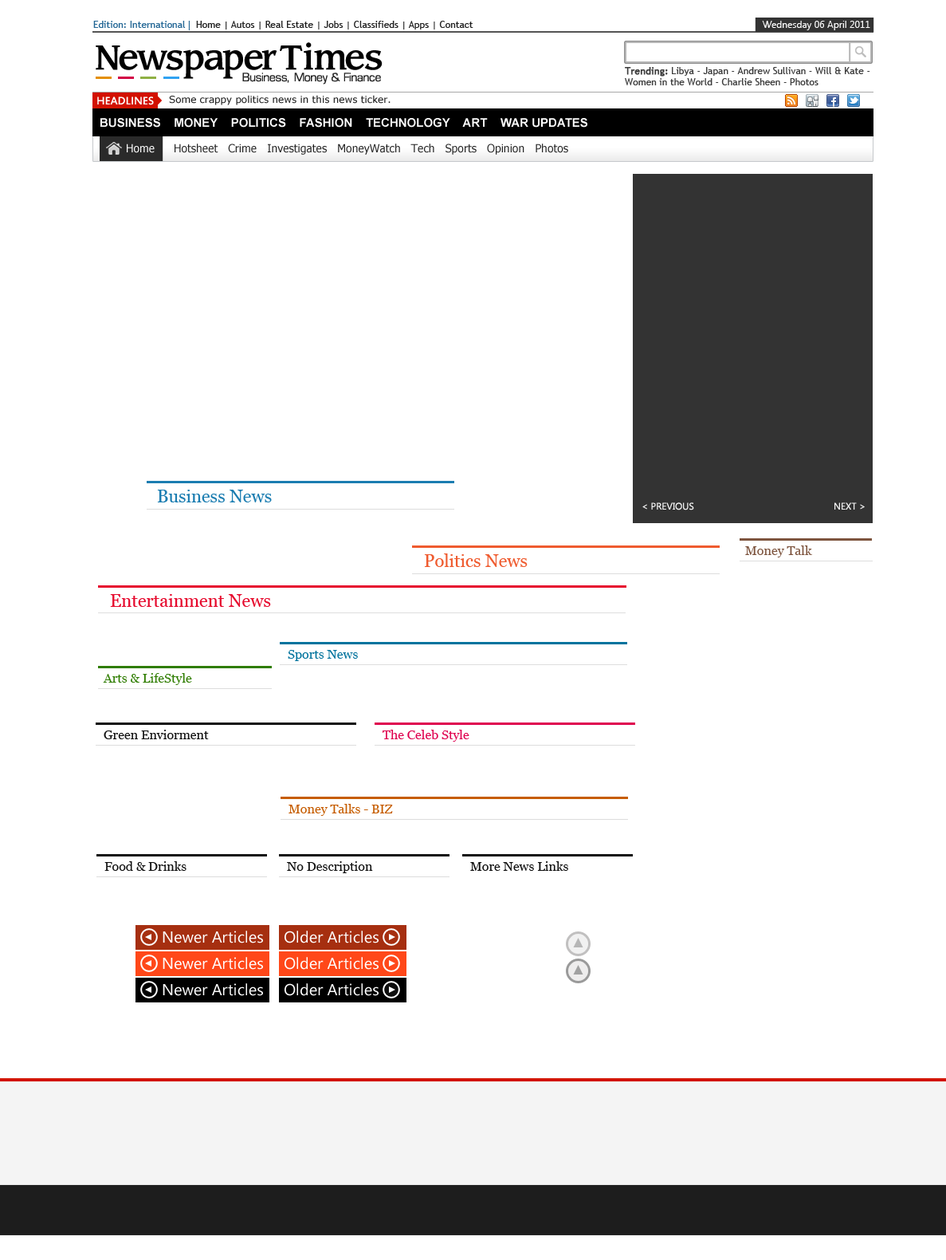
<style>
.page{position:relative;width:946px;height:1260px;background:#ffffff}
.page>*{position:absolute;margin:0}
.t1{font:9.6px "TrebuchetMS";color:#256896}
.t2{font:9.6px "SegoeUI";color:#256896}
.t3{font:9.6px "TrebuchetMS";color:#232323}
.t4{font:9.6px "SegoeUI";color:#ffffff}
.t5{font:35.9px "Sling";color:#000000}
.t6{font:12.8px "WaukeganLDO";color:#232323}
.t7{font:9.6px "TrebuchetMS";color:#3c3c3c}
.t8{font:9.6px "TrebuchetMS";color:#3c3c3c;font-weight:bold}
.t9{font:12px "EstrangeloEdessa";color:#ffffff}
.t10{font:9.6px "Verdana";color:#232323}
.t11{font:12px "Arial-BoldMT";color:#ffffff}
.t12{font:11.2px "Tahoma";color:#ffffff}
.t13{font:11.2px "Tahoma";color:#232323}
.t14{font:17.5px "Georgia";color:#1b7db1}
.t15{font:9.6px "SegoeUI";color:#f5f5f5}
.t16{font:12.8px "Georgia";color:#7d543e}
.t17{font:17.5px "Georgia";color:#ef5b2f}
.t18{font:17.5px "Georgia";color:#e60a2e}
.t19{font:12.8px "Georgia";color:#00739d}
.t20{font:12.8px "Georgia";color:#2f7d00}
.t21{font:12.8px "Georgia";color:#101010}
.t22{font:12.8px "Georgia";color:#df004f}
.t23{font:12.8px "Georgia";color:#c65d00}
.t24{font:15.9px "SegoeUI";color:#ffffff}
</style>
<div class="page">
<p class="t1" style="left:93px;top:21px;width:97px;height:9px">Edition: International <span class="t2">|</span></p>
<p class="t3" style="left:196px;top:21px;width:278px;height:9px">Home | Autos | Real Estate | Jobs | Classifieds | Apps | Contact</p>
<p class="t4" style="left:762px;top:21px;width:109px;height:9px">Wednesday 06 April 2011</p>
<p class="t5" style="left:96px;top:42px;width:287px;height:37px">Newspaper Times</p>
<p class="t6" style="left:242px;top:73px;width:139px;height:12px">Business,  Money &amp; Finance</p>
<p class="t7" style="left:625px;top:67px;width:246px;height:18px"><span class="t8">Trending:</span> Libya - Japan - Andrew Sullivan - Will &amp; Kate - <br>Women in the World - Charlie Sheen - Photos</p>
<p class="t9" style="left:97px;top:96px;width:57px;height:9px">HEADLINES</p>
<p class="t10" style="left:169px;top:95px;width:222px;height:10px">Some crappy politics news in this news ticker.</p>
<p class="t11" style="left:100px;top:118px;width:488px;height:10px">BUSINESS    MONEY    POLITICS    FASHION    TECHNOLOGY    ART    WAR UPDATES</p>
<p class="t12" style="left:127px;top:144px;width:28px;height:9px">Home</p>
<p class="t13" style="left:175px;top:144px;width:394px;height:11px">Hotsheet   Crime   Investigates   MoneyWatch   Tech   Sports   Opinion   Photos</p>
<p class="t14" style="left:157px;top:490px;width:115px;height:12px">Business News</p>
<p class="t15" style="left:643px;top:502px;width:52px;height:8px">&lt; PREVIOUS</p>
<p class="t15" style="left:835px;top:502px;width:30px;height:8px">NEXT &gt;</p>
<p class="t16" style="left:746px;top:545px;width:67px;height:12px">Money Talk</p>
<p class="t17" style="left:424px;top:553px;width:104px;height:14px">Politics News</p>
<p class="t18" style="left:110px;top:594px;width:161px;height:13px">Entertainment News</p>
<p class="t19" style="left:288px;top:650px;width:70px;height:11px">Sports News</p>
<p class="t20" style="left:103px;top:673px;width:89px;height:12px">Arts &amp; LifeStyle</p>
<p class="t21" style="left:104px;top:730px;width:105px;height:9px">Green Enviorment</p>
<p class="t22" style="left:383px;top:730px;width:87px;height:12px">The Celeb Style</p>
<p class="t23" style="left:289px;top:804px;width:104px;height:12px">Money Talks - BIZ</p>
<p class="t21" style="left:104px;top:861px;width:83px;height:10px">Food &amp; Drinks</p>
<p class="t21" style="left:287px;top:861px;width:86px;height:12px">No Description</p>
<p class="t21" style="left:470px;top:861px;width:99px;height:10px">More News Links</p>
<p class="t24" style="left:163px;top:931px;width:100px;height:12px">Newer Articles</p>
<p class="t24" style="left:285px;top:931px;width:94px;height:12px">Older Articles</p>
<p class="t24" style="left:163px;top:957px;width:100px;height:13px">Newer Articles</p>
<p class="t24" style="left:285px;top:957px;width:94px;height:13px">Older Articles</p>
<p class="t24" style="left:163px;top:983px;width:100px;height:13px">Newer Articles</p>
<p class="t24" style="left:285px;top:983px;width:94px;height:13px">Older Articles</p>
</div>
